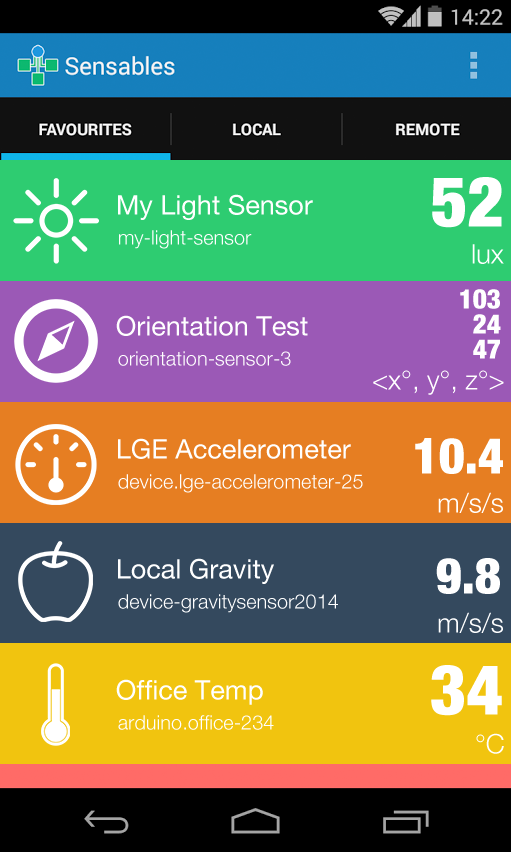
<style>
.page{position:relative;width:511px;height:852px}
.page>*{position:absolute;margin:0}
.t1{font:70px "HelveticaNeue-CondensedBlack";color:#ffffff}
.t2{font:27px "HelveticaNeue";color:#ffffff}
.t3{font:20px "HelveticaNeue-Light";color:#ffffff}
.t4{font:27px "HelveticaNeue-Light";color:#ffffff}
.t5{font:27px/25px "HelveticaNeue-CondensedBlack";color:#ffffff}
.t6{font:50px "HelveticaNeue-CondensedBlack";color:#ffffff}
</style>
<div class="page">
<p class="t1" style="left:432px;top:177px;width:70px;height:51px">52</p>
<p class="t2" style="left:118px;top:194px;width:195px;height:26px">My Light Sensor</p>
<p class="t3" style="left:119px;top:230px;width:133px;height:19px">my-light-sensor</p>
<p class="t4" style="left:472px;top:244px;width:32px;height:20px">lux</p>
<p class="t5" style="left:460px;top:289px;width:41px;height:70px;text-align:right">103<br>24<br>47</p>
<p class="t2" style="left:116px;top:315px;width:192px;height:21px">Orientation Test</p>
<p class="t3" style="left:118px;top:351px;width:173px;height:15px">orientation-sensor-3</p>
<p class="t4" style="left:373px;top:370px;width:131px;height:25px">&lt;x°, y°, z°&gt;</p>
<p class="t2" style="left:118px;top:438px;width:233px;height:21px">LGE Accelerometer</p>
<p class="t6" style="left:415px;top:438px;width:88px;height:36px">10.4</p>
<p class="t3" style="left:118px;top:474px;width:245px;height:19px">device.lge-accelerometer-25</p>
<p class="t4" style="left:438px;top:492px;width:65px;height:21px">m/s/s</p>
<p class="t2" style="left:118px;top:558px;width:156px;height:26px">Local Gravity</p>
<p class="t6" style="left:436px;top:558px;width:64px;height:36px">9.8</p>
<p class="t3" style="left:118px;top:594px;width:220px;height:19px">device-gravitysensor2014</p>
<p class="t4" style="left:438px;top:612px;width:65px;height:21px">m/s/s</p>
<p class="t1" style="left:431px;top:665px;width:71px;height:51px">34</p>
<p class="t2" style="left:116px;top:679px;width:147px;height:26px">Office Temp</p>
<p class="t3" style="left:118px;top:715px;width:156px;height:15px">arduino.office-234</p>
<p class="t4" style="left:476px;top:733px;width:28px;height:21px">°C</p>
</div>
